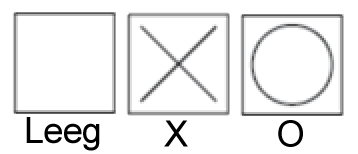
<style>
.page{position:relative;width:358px;height:154px;background:#ffffff}
.page>*{position:absolute;margin:0}
.t1{font:36.3px "ArialMT";letter-spacing:-0.02em;color:#000000}
</style>
<div class="page">
<p class="t1" style="left:26px;top:117px;width:74px;height:34px">Leeg</p>
<p class="t1" style="left:164px;top:120px;width:24px;height:27px">X</p>
<p class="t1" style="left:278px;top:120px;width:25px;height:27px">O</p>
</div>
